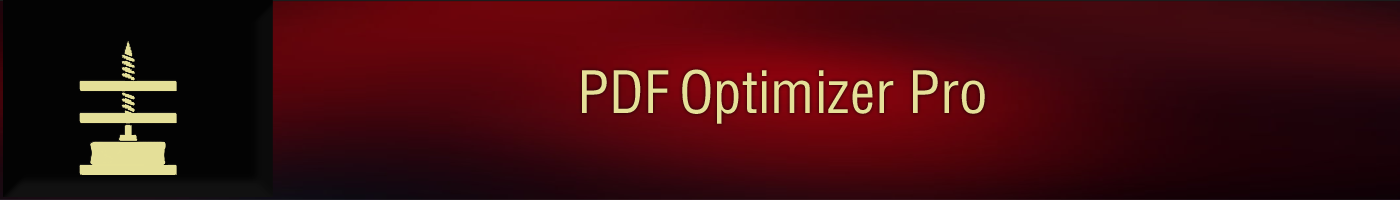
<style>
.page{position:relative;width:1400px;height:200px}
.page>*{position:absolute;margin:0}
.t1{font:57px "HelveticaLTStd-Cond";color:#e5e098}
</style>
<div class="page">
<p class="t1" style="left:582px;top:69px;width:403px;height:55px">PDF Optimizer Pro</p>
</div>
